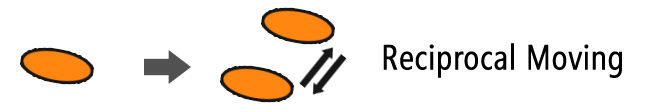
<style>
.page{position:relative;width:660px;height:112px;background:#ffffff}
.page>*{position:absolute;margin:0}
.t1{font:35px "SegoeCondensed";color:#000000;font-weight:bold}
</style>
<div class="page">
<p class="t1" style="left:383px;top:43px;width:239px;height:35px">Reciprocal Moving</p>
</div>
